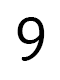
<style>
.page{position:relative;width:60px;height:80px;background:#ffffff}
.page>*{position:absolute;margin:0}
.t1{font:60px "STXinwei";color:#000000;scale:0.94 1}
</style>
<div class="page">
<p class="t1" style="left:17px;top:17px;width:28px;height:44px">9</p>
</div>
